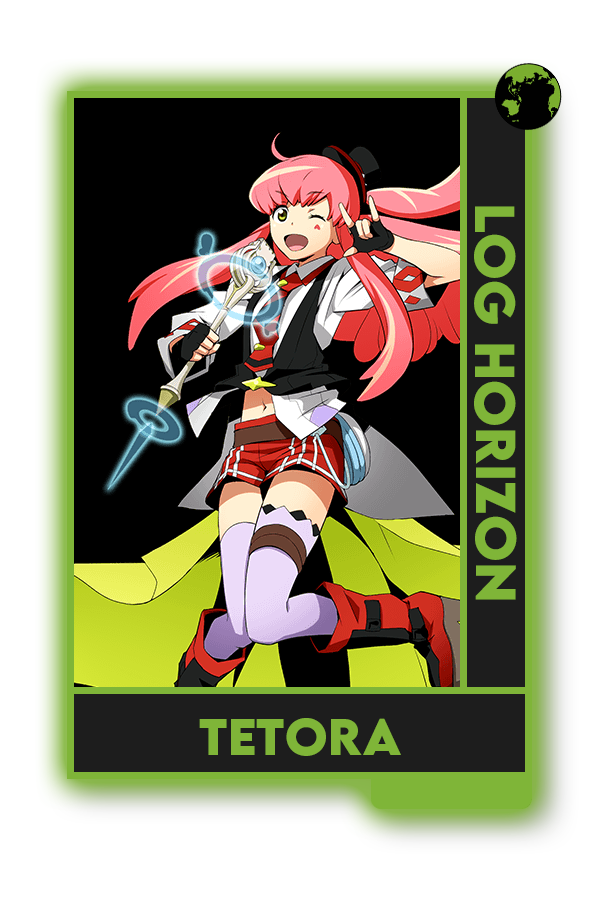
<style>
.page{position:relative;width:600px;height:900px;background:#ffffff}
.page>*{position:absolute;margin:0}
.t1{font:50px "LEMONMILK-Bold";color:#7fad41}
.t2{font:45.8px "LEMONMILK-Bold";color:#7fad41}
</style>
<div class="page">
<p class="t1" style="left:474px;top:206px;width:43px;height:394px;rotate:90deg">Log Horizon</p>
<p class="t2" style="left:199px;top:718px;width:202px;height:38px">Tetora</p>
</div>
